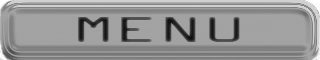
<style>
.page{position:relative;width:320px;height:60px;background:#a2a2a2}
.page>*{position:absolute;margin:0}
.t1{font:39px "OCRAExtended";scale:1.86 1}
</style>
<div class="page">
<p class="t1" style="left:78px;top:17px;width:162px;height:25px">MENU</p>
</div>
